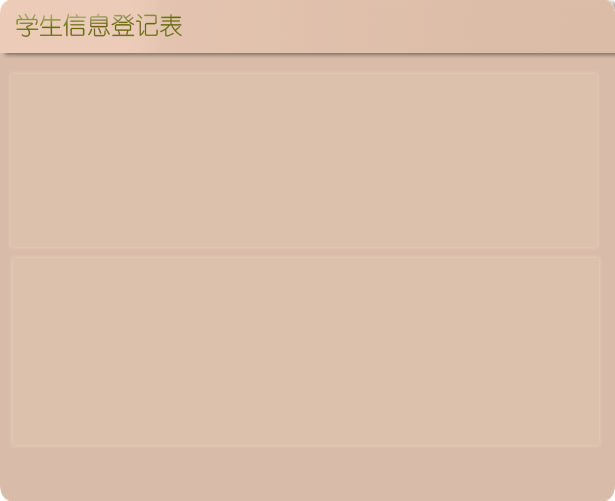
<style>
.page{position:relative;width:615px;height:501px;background:#dcc1ad}
.page>*{position:absolute;margin:0}
.t1{font:24px "YouYuan";color:#6b7016}
</style>
<div class="page">
<p class="t1" style="left:16px;top:13px;width:166px;height:24px">学生信息登记表</p>
</div>
